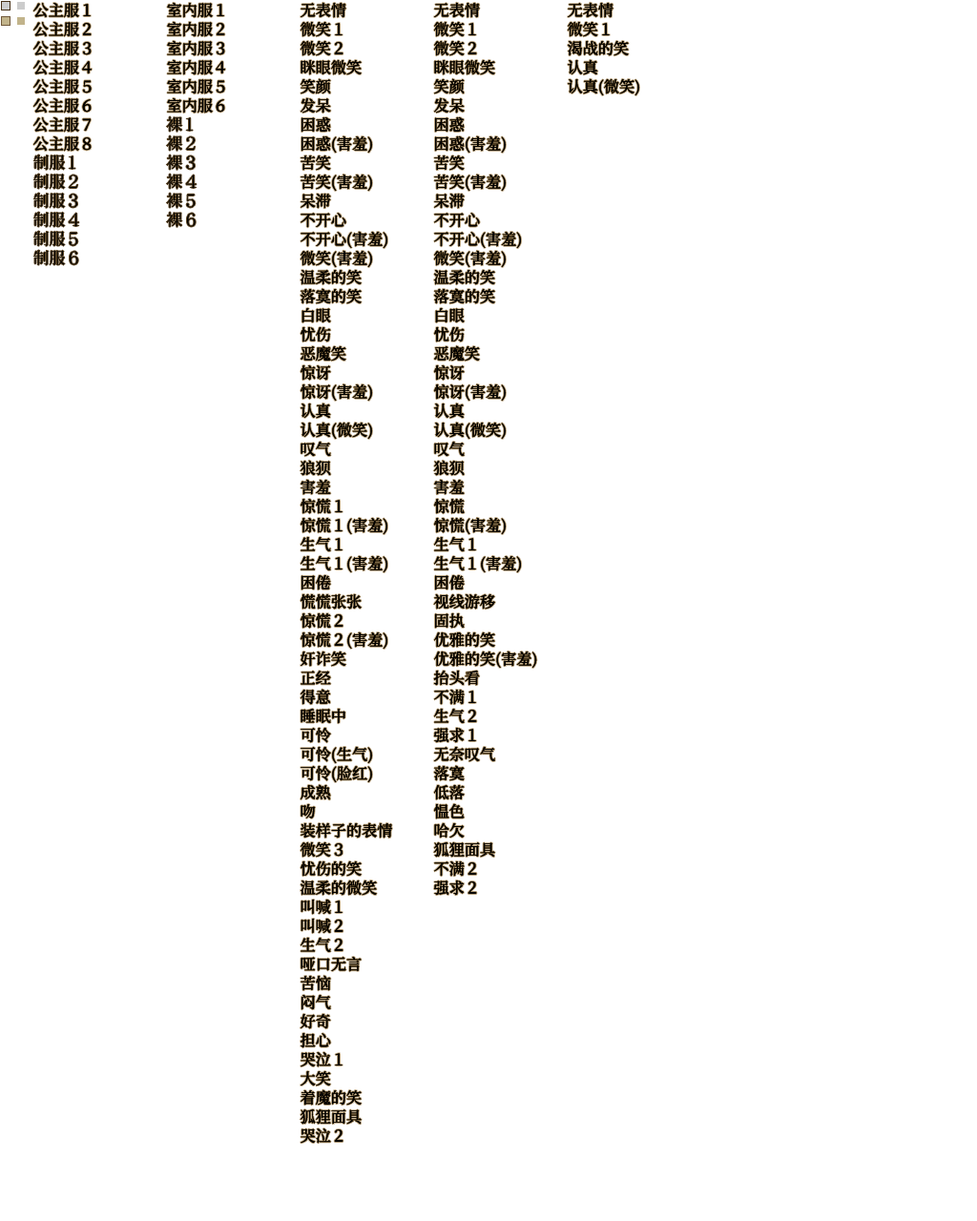
<style>
.page{position:relative;width:977px;height:1221px;background:#ffffff}
.page>*{position:absolute;margin:0}
.t1{font:15.4px/19.1px "ChillJinshuSongGBKMedium";color:#000000}
</style>
<div class="page">
<p class="t1" style="left:33px;top:3px;width:59px;height:149px">公主服１<br>公主服２<br>公主服３<br>公主服４<br>公主服５<br>公主服６<br>公主服７<br>公主服８</p>
<p class="t1" style="left:167px;top:2px;width:58px;height:112px">室内服１<br>室内服２<br>室内服３<br>室内服４<br>室内服５<br>室内服６</p>
<p class="t1" style="left:299px;top:2px;width:93px;height:1142px">无表情<br>微笑１<br>微笑２<br>眯眼微笑<br>笑颜<br>发呆<br>困惑<br>困惑(害羞)<br>苦笑<br>苦笑(害羞)<br>呆滞<br>不开心<br>不开心(害羞)<br>微笑(害羞)<br>温柔的笑<br>落寞的笑<br>白眼<br>忧伤<br>恶魔笑<br>惊讶<br>惊讶(害羞)<br>认真<br>认真(微笑)<br>叹气<br>狼狈<br>害羞<br>惊慌１<br>惊慌１(害羞)<br>生气１<br>生气１(害羞)<br>困倦<br>慌慌张张<br>惊慌２<br>惊慌２(害羞)<br>奸诈笑<br>正经<br>得意<br>睡眠中<br>可怜<br>可怜(生气)<br>可怜(脸红)<br>成熟<br>吻<br>装样子的表情<br>微笑３<br>忧伤的笑<br>温柔的微笑<br>叫喊１<br>叫喊２<br>生气２<br>哑口无言<br>苦恼<br>闷气<br>好奇<br>担心<br>哭泣１<br>大笑<br>着魔的笑<br>狐狸面具<br>哭泣２</p>
<p class="t1" style="left:433px;top:2px;width:104px;height:894px">无表情<br>微笑１<br>微笑２<br>眯眼微笑<br>笑颜<br>发呆<br>困惑<br>困惑(害羞)<br>苦笑<br>苦笑(害羞)<br>呆滞<br>不开心<br>不开心(害羞)<br>微笑(害羞)<br>温柔的笑<br>落寞的笑<br>白眼<br>忧伤<br>恶魔笑<br>惊讶<br>惊讶(害羞)<br>认真<br>认真(微笑)<br>叹气<br>狼狈<br>害羞<br>惊慌<br>惊慌(害羞)<br>生气１<br>生气１(害羞)<br>困倦<br>视线游移<br>固执<br>优雅的笑<br>优雅的笑(害羞)<br>抬头看<br>不满１<br>生气２<br>强求１<br>无奈叹气<br>落寞<br>低落<br>愠色<br>哈欠<br>狐狸面具<br>不满２<br>强求２</p>
<p class="t1" style="left:568px;top:2px;width:71px;height:93px">无表情<br>微笑１<br>渴战的笑<br>认真<br>认真(微笑)</p>
</div>
